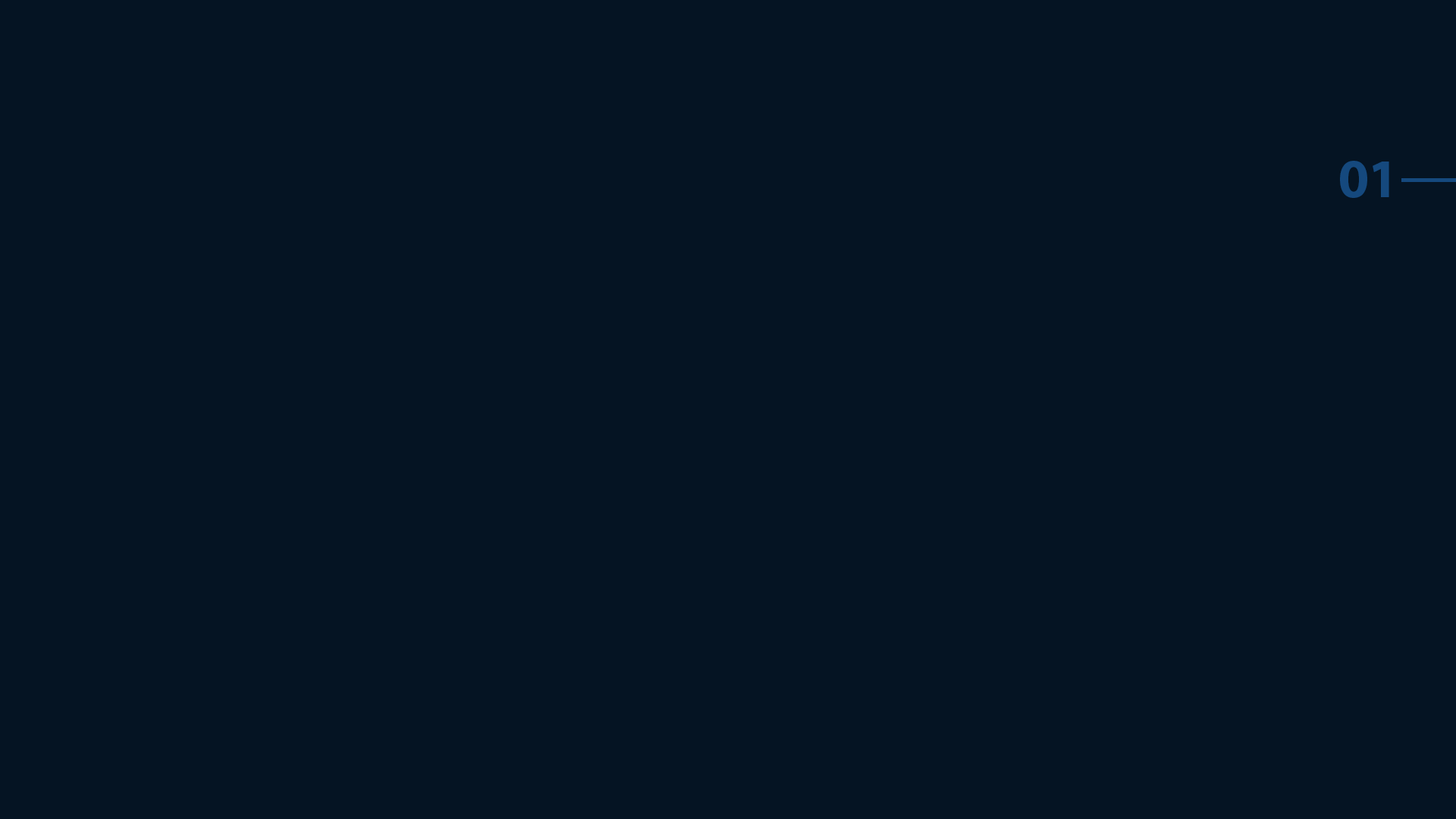
<style>
.page{position:relative;width:1456px;height:819px;background:#051423}
.page>*{position:absolute;margin:0}
.t1{font:54.6px "MyriadPro-Bold";color:#15497e}
</style>
<div class="page">
<p class="t1" style="left:1340px;top:161px;width:49px;height:37px">01</p>
</div>
